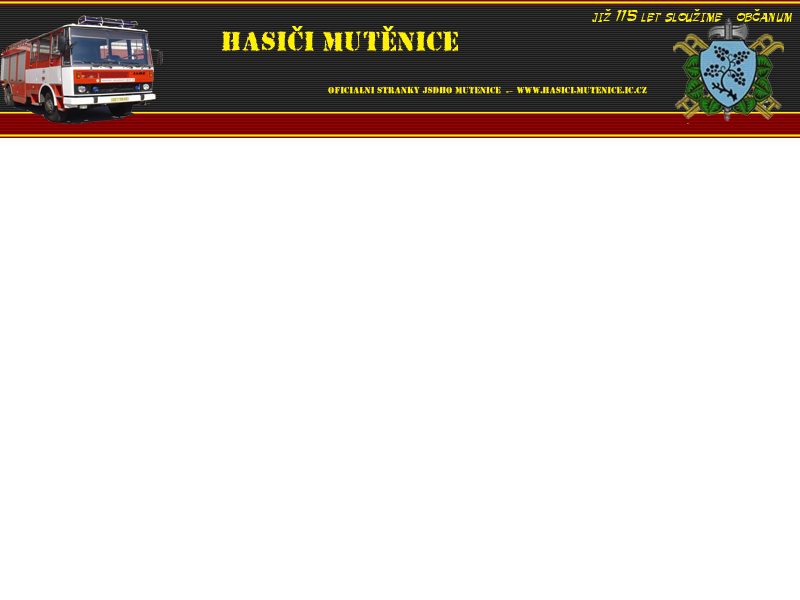
<style>
.page{position:relative;width:800px;height:600px;background:#ffffff}
.page>*{position:absolute;margin:0}
.t1{font:14px "Ballot";color:#fff004}
.t2{font:18px "ArialMT";color:#fff004}
.t3{font:36px "ArialMT";color:#ffff00}
.t4{font:8px "Due-Date-Regular";color:#fff004}
.t5{font:8px "Arial-Black";color:#fff004}
.t6{font:8px "Fixedsys"}
</style>
<div class="page">
<p class="t1" style="left:592px;top:10px;width:201px;height:12px">jiz 115 let slouzime   obcanum</p>
<p class="t2" style="left:605px;top:9px;width:6px;height:2px">ˇ</p>
<p class="t2" style="left:694px;top:9px;width:6px;height:2px">ˇ</p>
<p class="t2" style="left:754px;top:9px;width:6px;height:2px">ˇ</p>
<p class="t3" style="left:291px;top:26px;width:12px;height:5px">ˇ</p>
<p class="t3" style="left:382px;top:26px;width:12px;height:5px">ˇ</p>
<p class="t4" style="left:328px;top:86px;width:319px;height:8px">Oficialni stranky JSDHO Mutenice  <span class="t5">-</span>   www.hasici<span class="t5">-</span>mutenice.ic.cz</p>
<p class="t6" style="left:509px;top:91px;width:4px;height:1px">-</p>
</div>
